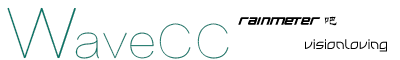
<style>
.page{position:relative;width:400px;height:60px;background:#ffffff}
.page>*{position:absolute;margin:0}
.t1{font:90.5px "FZLTCXHJW--GB1-0";color:#077568}
.t2{font:9.5px "Supreme";color:#000000}
.t3{font:13.7px "STLiti";color:#000000}
.t4{font:45.2px "FZLTCXHJW--GB1-0";color:#077568}
.t5{font:15.9px "Rounded";color:#000000}
</style>
<div class="page">
<p class="t1" style="left:7px;top:7px;width:69px;height:52px">w</p>
<p class="t2" style="left:238px;top:17px;width:83px;height:8px">RAINMETER</p>
<p class="t3" style="left:324px;top:16px;width:13px;height:10px">吧</p>
<p class="t4" style="left:75px;top:23px;width:154px;height:36px">aveCC</p>
<p class="t5" style="left:305px;top:39px;width:82px;height:13px">visionloving</p>
</div>
